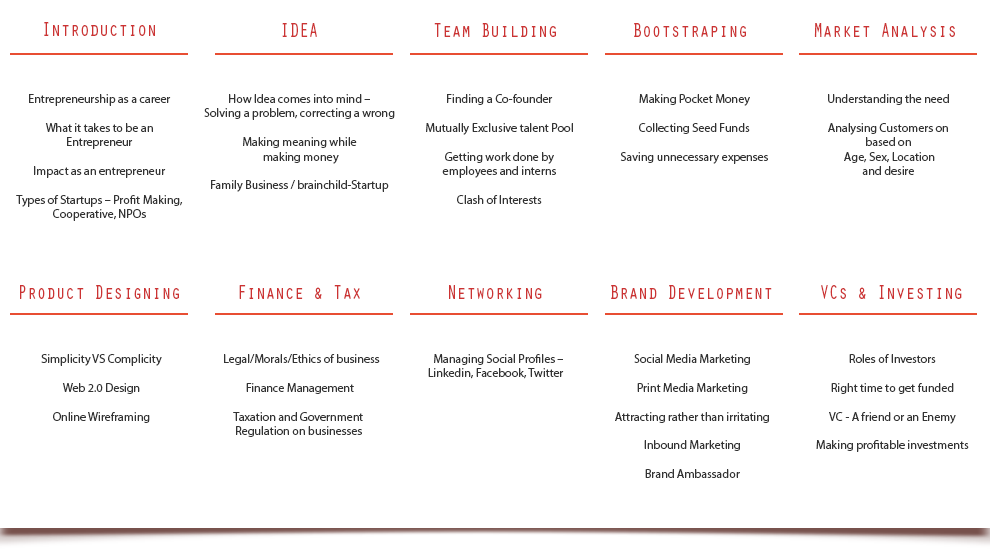
<style>
.page{position:relative;width:990px;height:550px;background:#ffffff}
.page>*{position:absolute;margin:0}
.t1{font:20px "OratorStd";color:#cc3333;scale:0.8 1}
.t2{font:12px "MyriadPro-Regular";color:#333333}
</style>
<div class="page">
<p class="t1" style="left:44px;top:22px;width:111px;height:14px">Introduction</p>
<p class="t1" style="left:282px;top:23px;width:35px;height:14px">IDEA</p>
<p class="t1" style="left:434px;top:23px;width:122px;height:14px">Team Building</p>
<p class="t1" style="left:634px;top:23px;width:112px;height:14px">Bootstraping</p>
<p class="t1" style="left:814px;top:23px;width:141px;height:14px">Market Analysis</p>
<p class="t2" style="left:16px;top:94px;width:167px;height:127px;text-align:center">Entrepreneurship as a career<br> <br>What it takes to be an <br>Entrepreneur<br> <br>Impact as an entrepreneur<br><br>Types of Startups – Profit Making, <br>Cooperative, NPOs</p>
<p class="t2" style="left:204px;top:94px;width:191px;height:98px;text-align:center">How Idea comes into mind – <br>Solving a problem, correcting a wrong<br><br>Making meaning while<br> making money<br><br>Family Business / brainchild-Startup</p>
<p class="t2" style="left:426px;top:94px;width:147px;height:110px;text-align:center">Finding a Co-founder<br><br>Mutually Exclusive talent Pool<br> <br>Getting work done by <br>employees and interns<br><br>Clash of Interests</p>
<p class="t2" style="left:620px;top:94px;width:148px;height:70px;text-align:center">Making Pocket Money<br><br>Collecting Seed Funds<br><br>Saving unnecessary expenses</p>
<p class="t2" style="left:828px;top:94px;width:121px;height:81px;text-align:center">Understanding the need <br><br>Analysing Customers on <br>based on<br> Age, Sex, Location <br>and desire</p>
<p class="t1" style="left:20px;top:285px;width:159px;height:14px">Product Designing</p>
<p class="t1" style="left:239px;top:285px;width:121px;height:14px">Finance &amp; Tax</p>
<p class="t1" style="left:449px;top:285px;width:93px;height:14px">Networking</p>
<p class="t1" style="left:611px;top:285px;width:161px;height:14px">Brand Development</p>
<p class="t1" style="left:821px;top:285px;width:141px;height:14px">VCs &amp; Investing</p>
<p class="t2" style="left:224px;top:354px;width:156px;height:83px;text-align:center">Legal/Morals/Ethics of business<br><br>             Finance Management<br><br>            Taxation and Government <br>            Regulation on businesses</p>
<p class="t2" style="left:428px;top:354px;width:136px;height:25px;text-align:center">Managing Social Profiles – <br>            Linkedin, Facebook, Twitter</p>
<p class="t2" style="left:615px;top:354px;width:154px;height:124px;text-align:center">Social Media Marketing<br><br>Print Media Marketing<br><br>Attracting rather than irritating <br><br>Inbound Marketing<br><br>Brand Ambassador</p>
<p class="t2" style="left:816px;top:354px;width:153px;height:98px;text-align:center">Roles of Investors<br><br>Right time to get funded<br><br>VC - A friend or an Enemy<br><br>Making profitable investments</p>
</div>
